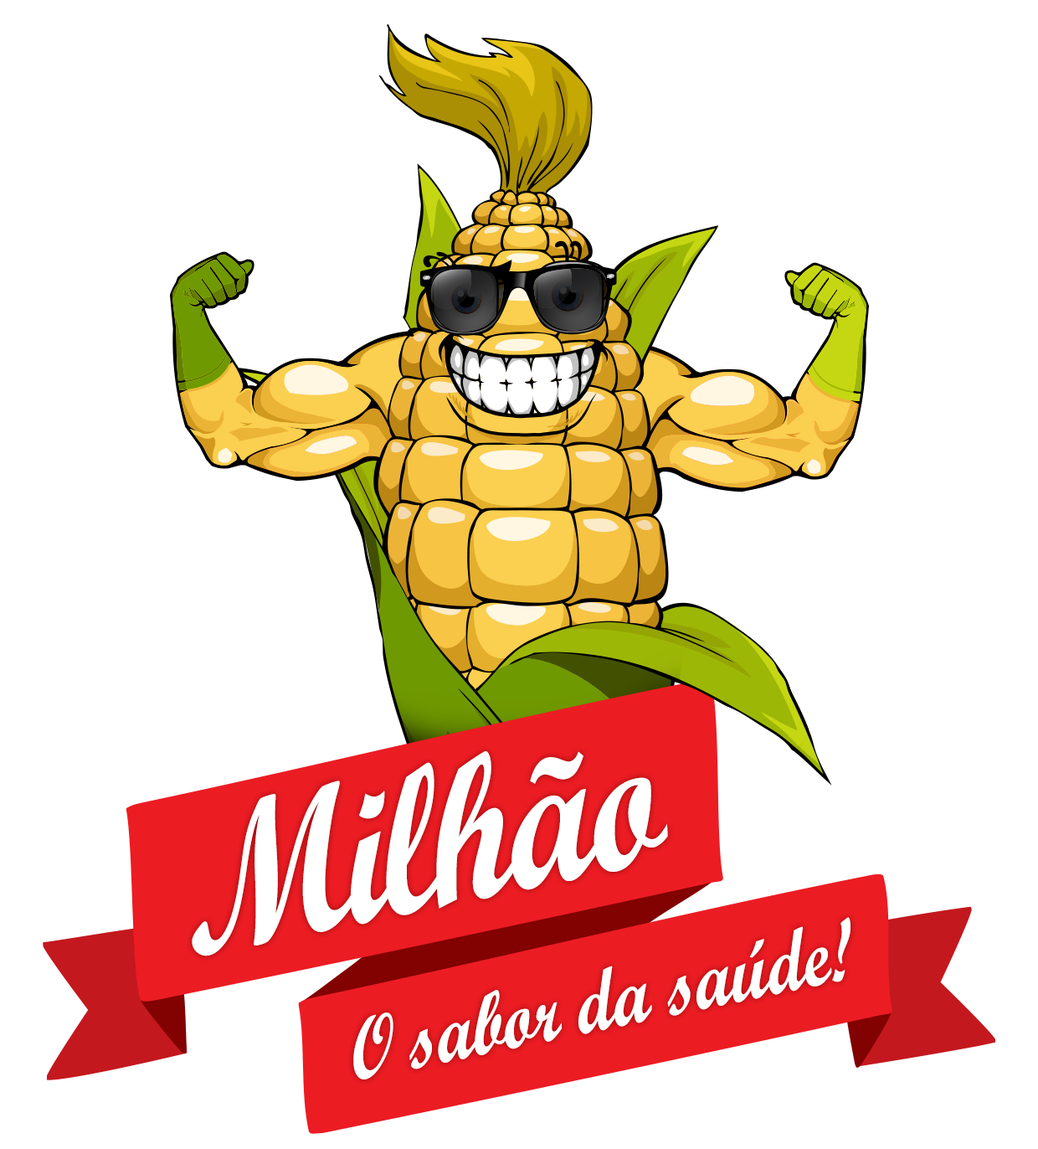
<style>
.page{position:relative;width:1038px;height:1149px;background:#ffffff}
.page>*{position:absolute;margin:0}
.t1{font:206.5px "ScriptMTBold";letter-spacing:-0.02em;color:#ffffff;scale:0.81 1}
.t2{font:87.3px "ScriptMTBold";color:#ffffff;scale:0.81 1}
</style>
<div class="page">
<p class="t1" style="left:192px;top:751px;width:476px;height:205px;rotate:-12deg">Milhão</p>
<p class="t2" style="left:353px;top:917px;width:498px;height:162px;rotate:-12deg">O sabor da saúde!</p>
</div>
